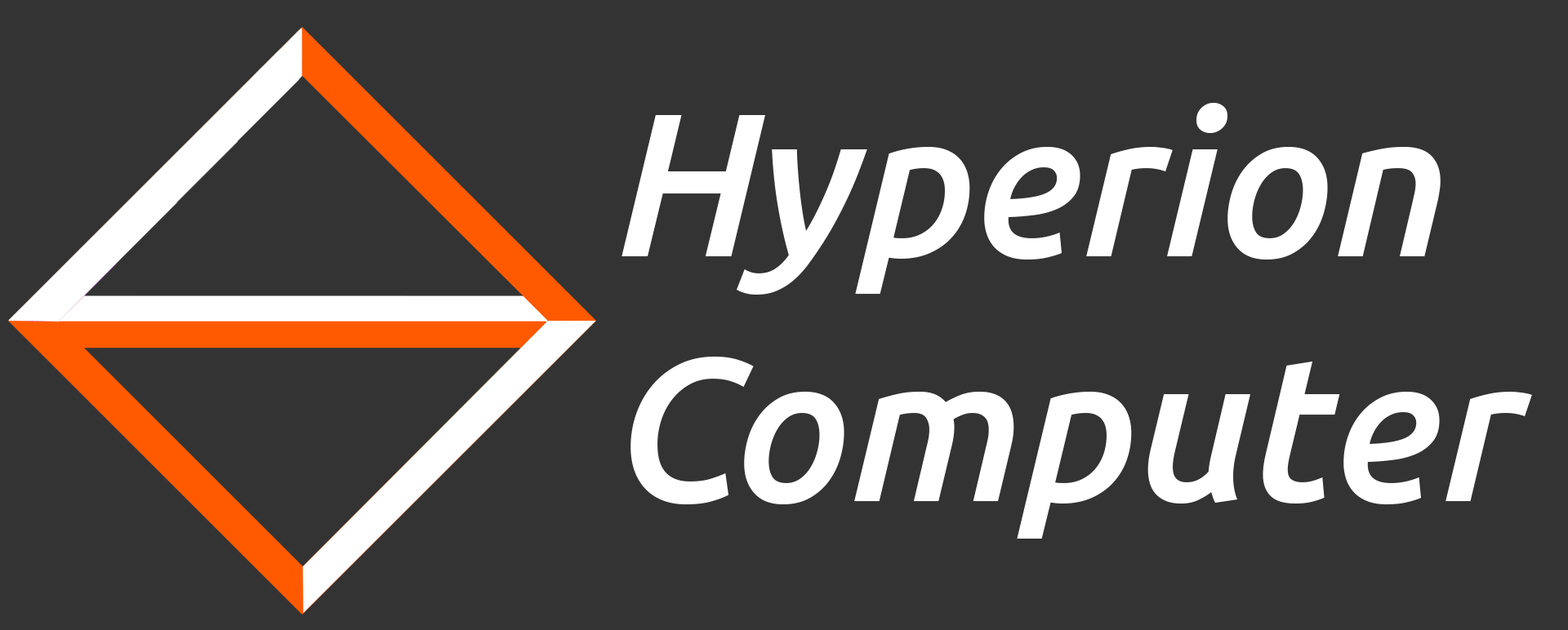
<style>
.page{position:relative;width:1568px;height:630px;background:#333333}
.page>*{position:absolute;margin:0}
.t1{font:204.2px/245px "Ubuntu-MediumItalic";color:#ffffff}
</style>
<div class="page">
<p class="t1" style="left:621px;top:103px;width:911px;height:436px">Hyperion <br>Computer</p>
</div>
